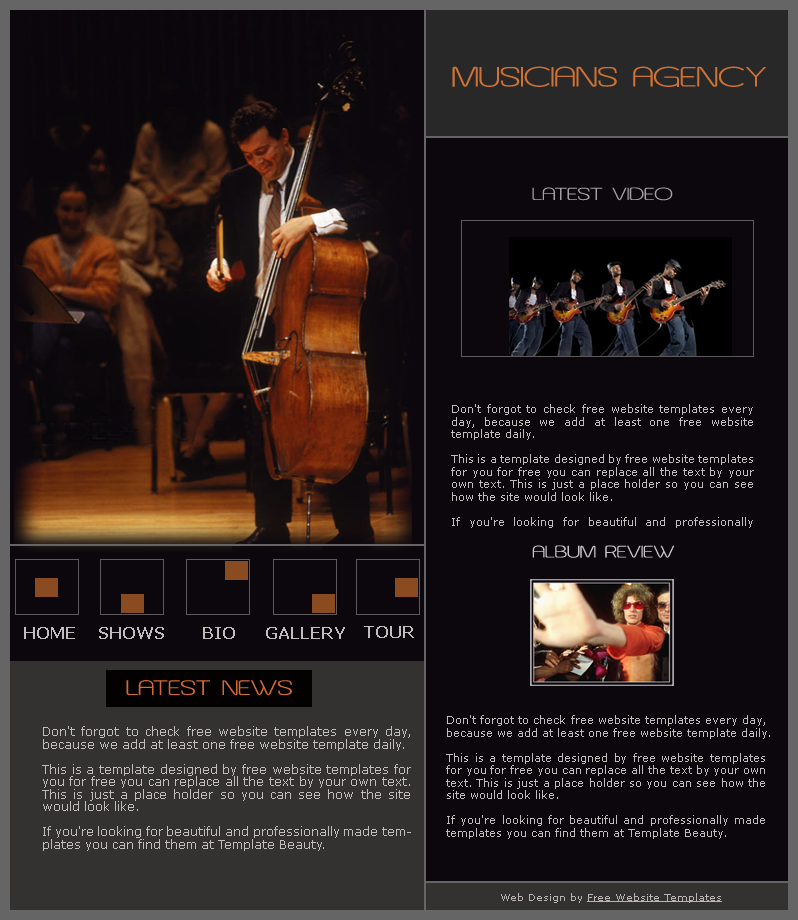
<style>
.page{position:relative;width:798px;height:920px;background:#0c070d}
.page>*{position:absolute;margin:0}
.t1{font:33.3px "AsenineWide";color:#cf7235}
.t2{font:20.8px "AsenineWide";color:#a29ea2}
.t3{font:11px/12.5px "Verdana";color:#c2bebe}
.t4{font:20px "AsenineWide";color:#c7c7c7}
.t5{font:16px "Verdana-Bold";color:#c2bebe}
.t6{font:25px "AsenineWide";color:#d26a36}
.t7{font:12px/12.5px "Verdana";color:#c2bebe}
.t8{font:10px "Verdana";color:#b9b5b5;text-decoration:underline}
.t9{font:10px "Verdana";color:#b9b5b5}
</style>
<div class="page">
<p class="t1" style="left:452px;top:66px;width:314px;height:21px">MUSICIANS AGENCY</p>
<p class="t2" style="left:532px;top:187px;width:141px;height:14px">LATEST VIDEO</p>
<p class="t3" style="left:451px;top:404px;width:303px;height:124px;text-align:justify">Don't forgot to check free website templates every day, because we add at least one free website template daily.<br><br>This is a template designed by free website templates for you for free you can replace all the text by your own text. This is just a place holder so you can see how the site would look like.<br><br>If you're looking for beautiful and professionally made templates you can find them at Template Beauty.</p>
<p class="t4" style="left:532px;top:545px;width:143px;height:13px">ALBUM REVIEW</p>
<p class="t5" style="left:24px;top:627px;width:51px;height:12px">HOME</p>
<p class="t5" style="left:99px;top:627px;width:65px;height:12px">SHOWS</p>
<p class="t5" style="left:203px;top:627px;width:32px;height:12px">BIO</p>
<p class="t5" style="left:266px;top:627px;width:79px;height:12px">GALLERY</p>
<p class="t5" style="left:364px;top:626px;width:50px;height:12px">TOUR</p>
<p class="t6" style="left:126px;top:680px;width:166px;height:16px">LATEST NEWS</p>
<p class="t7" style="left:42px;top:726px;width:369px;height:125px;text-align:justify">Don't forgot to check free website templates every day, because we add at least one free website template daily.<br><br>This is a template designed by free website templates for you for free you can replace all the text by your own text. This is just a place holder so you can see how the site would look like.<br><br>If you're looking for beautiful and professionally made templates you can find them at Template Beauty.</p>
<p class="t3" style="left:446px;top:715px;width:324px;height:124px;text-align:justify">Don't forgot to check free website templates every day, because we add at least one free website template daily.<br><br>This is a template designed by free website templates for you for free you can replace all the text by your own text. This is just a place holder so you can see how the site would look like.<br><br>If you're looking for beautiful and professionally made templates you can find them at Template Beauty.</p>
<p class="t8" style="left:501px;top:893px;width:221px;height:10px"><span class="t9">Web Design by </span>Free Website Templates</p>
</div>
